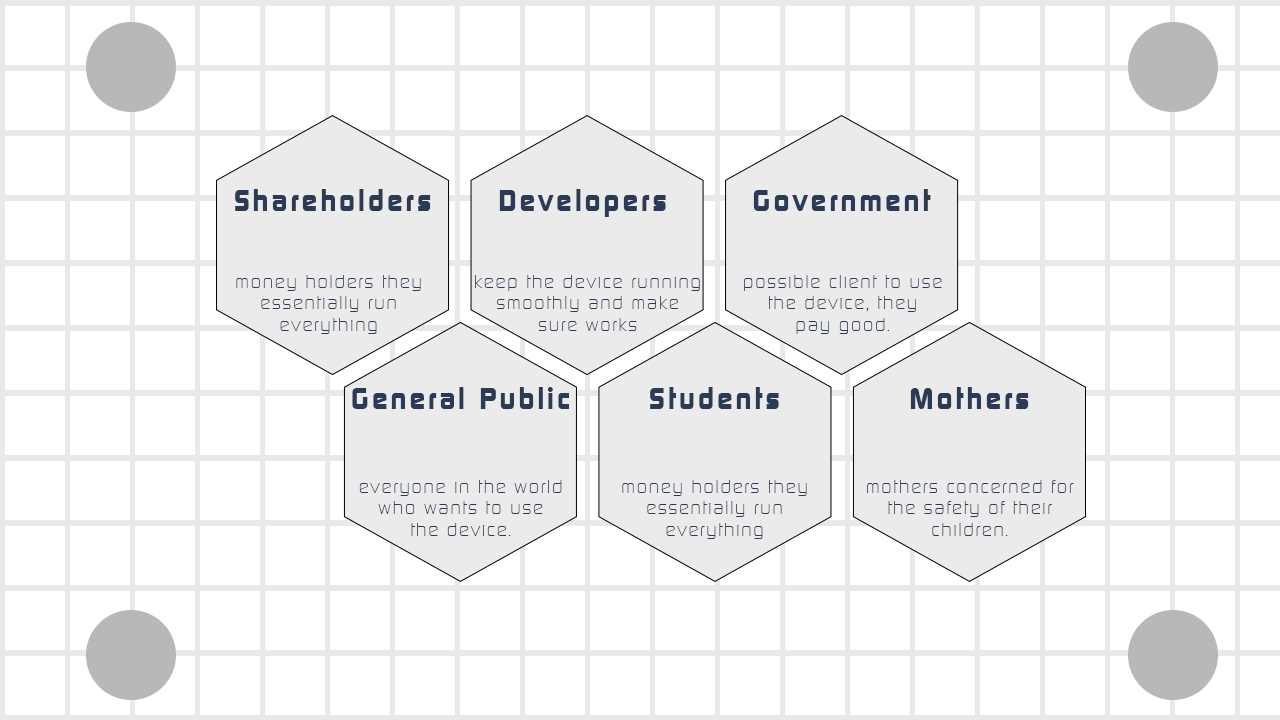
<style>
.page{position:relative;width:1280px;height:720px;background:#ffffff}
.page>*{position:absolute;margin:0}
.t1{font:30px "ContinuumBold";letter-spacing:0.1em;color:#2b3b55}
.t2{font:18px "ContinuumLight";letter-spacing:0.1em;color:#2b3b55}
</style>
<div class="page">
<p class="t1" style="left:235px;top:189px;width:196px;height:22px">Shareholders</p>
<p class="t1" style="left:499px;top:189px;width:167px;height:28px">Developers</p>
<p class="t1" style="left:753px;top:189px;width:178px;height:22px">Government</p>
<p class="t2" style="left:236px;top:275px;width:185px;height:59px;text-align:center">money holders they <br>essentially run <br>everything</p>
<p class="t2" style="left:475px;top:275px;width:225px;height:56px;text-align:center">keep the device running<br>smoothly and make<br>sure works</p>
<p class="t2" style="left:744px;top:275px;width:198px;height:59px;text-align:center">possible client to use<br>the device, they<br>pay good.</p>
<p class="t1" style="left:352px;top:387px;width:217px;height:22px">General Public</p>
<p class="t1" style="left:650px;top:387px;width:129px;height:22px">Students</p>
<p class="t1" style="left:910px;top:387px;width:119px;height:22px">Mothers</p>
<p class="t2" style="left:359px;top:480px;width:203px;height:56px;text-align:center">everyone in the world <br>who wants to use<br>the device.</p>
<p class="t2" style="left:622px;top:480px;width:185px;height:59px;text-align:center">money holders they <br>essentially run <br>everything</p>
<p class="t2" style="left:867px;top:480px;width:207px;height:56px;text-align:center">mothers concerned for <br>the safety of their<br>children.</p>
</div>
